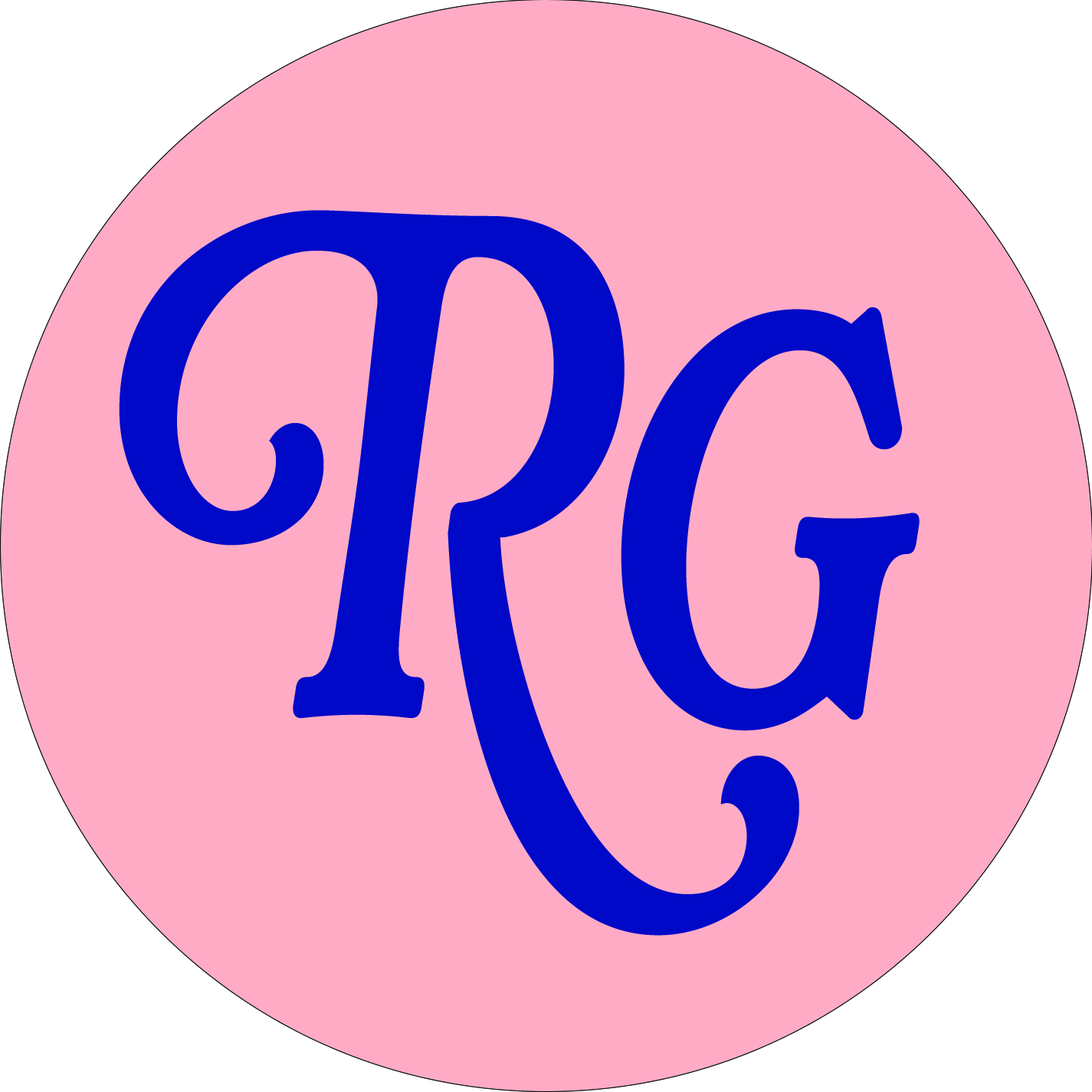
<style>
.page{position:relative;width:1092px;height:1092px;background:#ffabc5}
.page>*{position:absolute;margin:0}
.t1{font:638.6px "Rafaella-Bold";color:#0009c8}
</style>
<div class="page">
<p class="t1" style="left:119px;top:210px;width:801px;height:726px">Rg</p>
</div>
